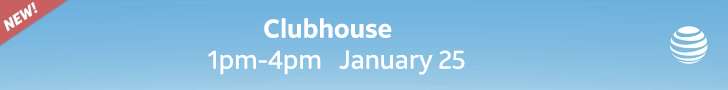
<style>
.page{position:relative;width:728px;height:90px}
.page>*{position:absolute;margin:0}
.t1{font:26px/19px "ATTAleckSans_Medium";letter-spacing:-0.01em;color:#ffffff}
.t2{font:26px/19px "ATTAleckSans_Bold";letter-spacing:-0.01em;color:#ffffff}
</style>
<div class="page">
<p class="t1" style="left:208px;top:18px;width:257px;height:57px;text-align:center"><span class="t2">Clubhouse<br>   </span>1pm-4pm   January 25</p>
</div>
